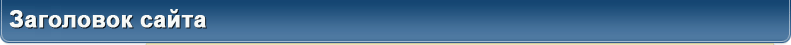
<style>
.page{position:relative;width:791px;height:45px}
.page>*{position:absolute;margin:0}
.t1{font:23px "Arial-BoldMT";color:#f7f9f7;font-weight:bold}
</style>
<div class="page">
<p class="t1" style="left:9px;top:9px;width:197px;height:19px">Заголовок сайта</p>
</div>
